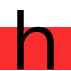
<style>
.page{position:relative;width:71px;height:71px;background:#f92d2d}
.page>*{position:absolute;margin:0}
.t1{font:80px "Kalinga";letter-spacing:0.05em;color:#000000;font-weight:bold}
</style>
<div class="page">
<p class="t1" style="left:17px;top:10px;width:37px;height:60px">h</p>
</div>
